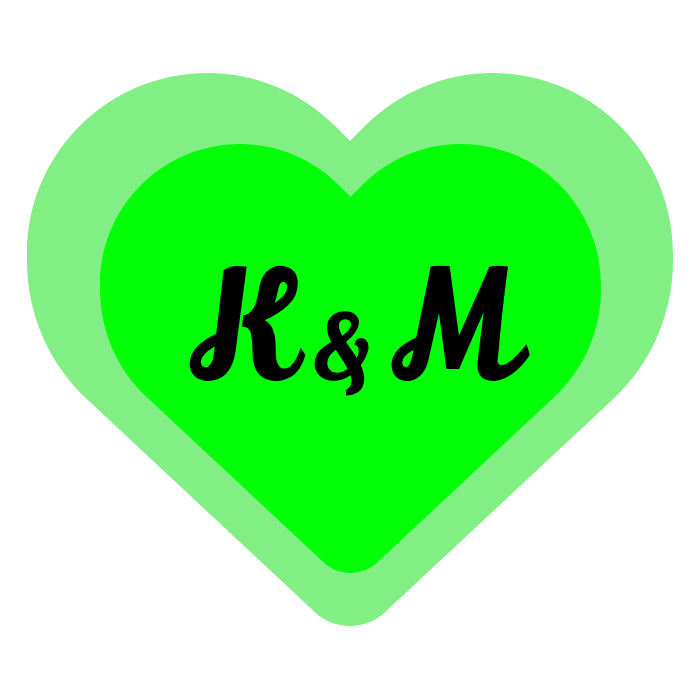
<style>
.page{position:relative;width:700px;height:700px;background:#ffffff}
.page>*{position:absolute;margin:0}
.t1{font:150px "LilyScriptOne-Regular";color:#000000}
.t2{font:90px "LilyScriptOne-Regular";color:#000000}
</style>
<div class="page">
<p class="t1" style="left:189px;top:265px;width:341px;height:131px">K <span class="t2">&amp; </span>M</p>
</div>
